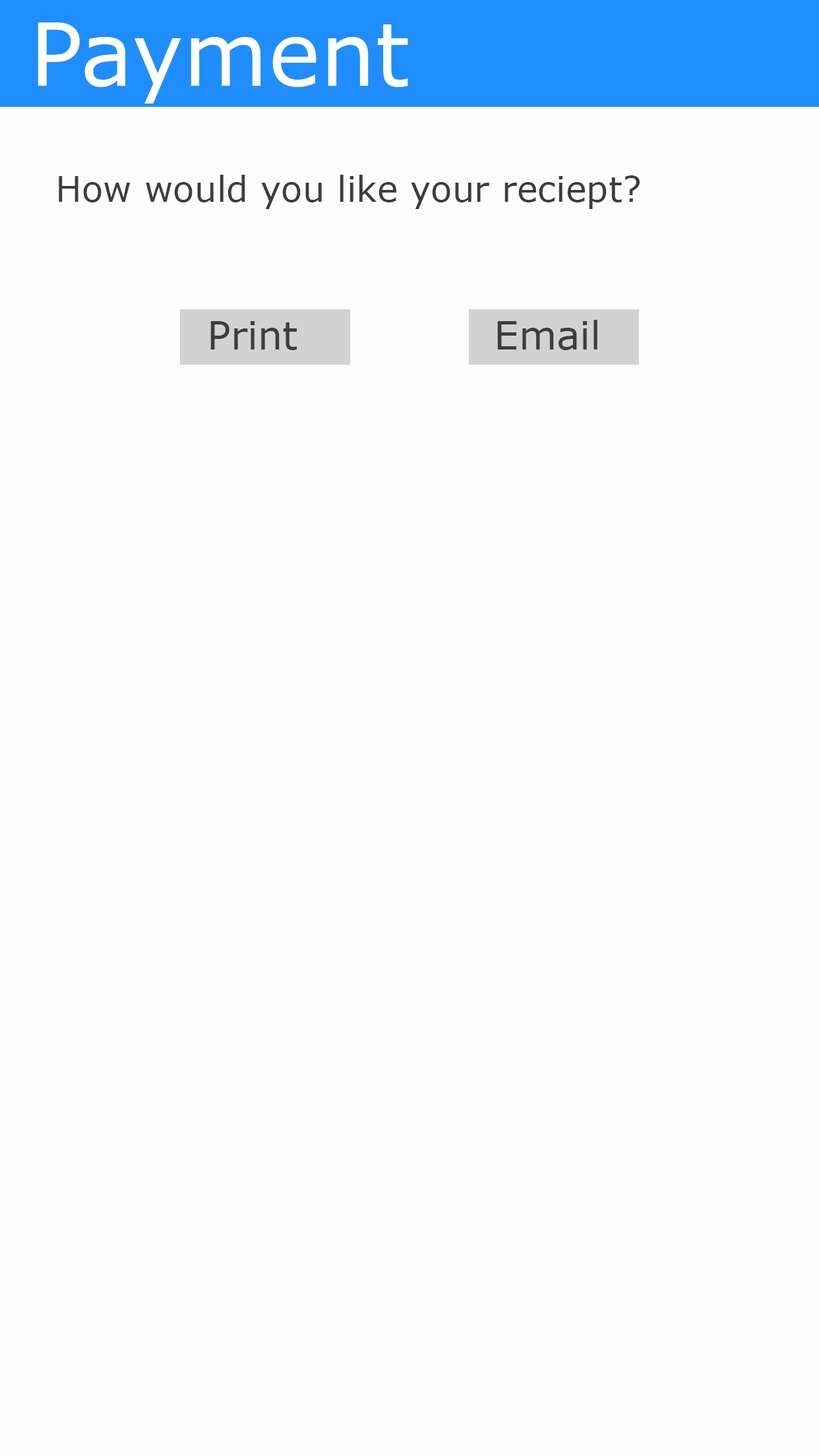
<style>
.page{position:relative;width:819px;height:1456px;background:#fdfdfd}
.page>*{position:absolute;margin:0}
.t1{font:87.2px "MSReferenceSansSerif";color:#ffffff}
.t2{font:35.2px "MSReferenceSansSerif";color:#3e3c3c}
.t3{font:38.7px "MSReferenceSansSerif";color:#3d3d3d}
</style>
<div class="page">
<p class="t1" style="left:38px;top:22px;width:370px;height:82px">Payment</p>
<p class="t2" style="left:59px;top:175px;width:581px;height:34px">How would you like your reciept?</p>
<p class="t3" style="left:210px;top:321px;width:87px;height:29px">Print</p>
<p class="t3" style="left:497px;top:320px;width:100px;height:30px">Email</p>
</div>
